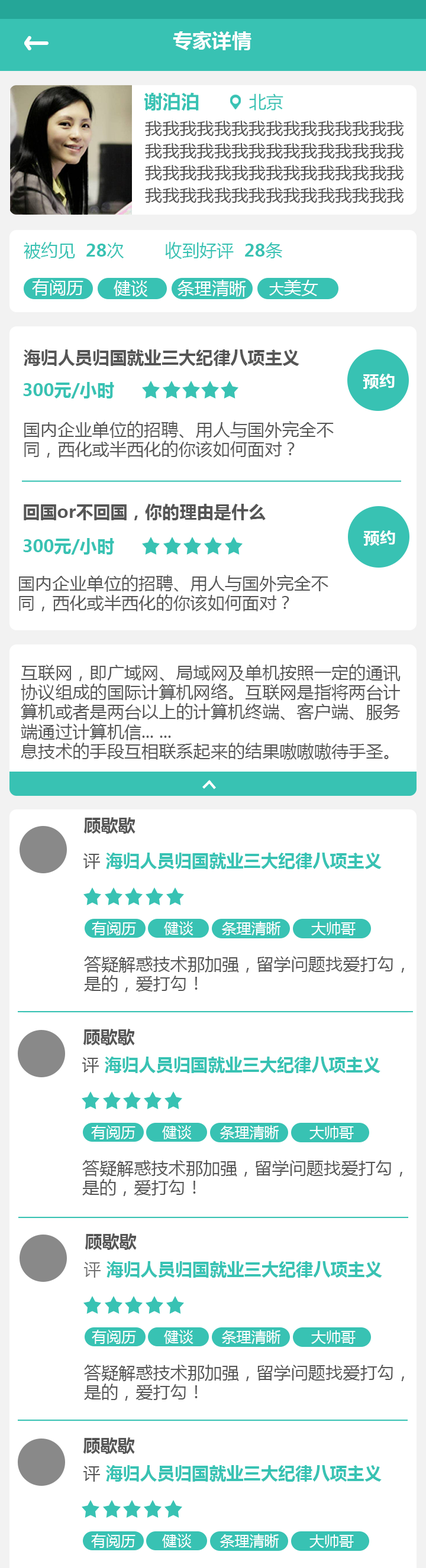
<style>
.page{position:relative;width:426px;height:1568px;background:#ffffff}
.page>*{position:absolute;margin:0}
.t1{font:19.7px "MicrosoftYaHei-Bold";color:#fefefe}
.t2{font:18.5px "MicrosoftYaHei-Bold";color:#38c2b3}
.t3{font:17.2px "MicrosoftYaHei";color:#38c2b3}
.t4{font:17.2px/22.2px "MicrosoftYaHei";color:#565656}
.t5{font:17.2px "MicrosoftYaHei-Bold";color:#38c2b3}
.t6{font:17.2px "MicrosoftYaHei";color:#ffffff}
.t7{font:14.8px "MicrosoftYaHei";color:#ffffff}
.t8{font:17.2px "MicrosoftYaHei-Bold";color:#565656}
.t9{font:16px "MicrosoftYaHei-Bold";color:#ffffff}
.t10{font:17.2px/19.7px "MicrosoftYaHei";color:#565656}
.t11{font:17.2px "MicrosoftYaHei";color:#565656}
.t12{font:14.8px "MicrosoftYaHei";color:#fefefe}
.t13{font:17.2px "MicrosoftYaHei";color:#727272}
</style>
<div class="page">
<p class="t1" style="left:173px;top:31px;width:78px;height:19px">专家详情</p>
<p class="t2" style="left:144px;top:92px;width:55px;height:19px">谢泊泊</p>
<p class="t3" style="left:249px;top:93px;width:34px;height:18px">北京</p>
<p class="t4" style="left:145px;top:121px;width:258px;height:82px">我我我我我我我我我我我我我我我我我我我我我我我我我我我我我我我我我我我我我我我我我我我我我我我我我我我我我我我我我我我我</p>
<p class="t3" style="left:24px;top:242px;width:259px;height:17px">被约见  <span class="t5">28</span>次        收到好评  <span class="t5">28</span>条</p>
<p class="t6" style="left:32px;top:279px;width:51px;height:17px">有阅历</p>
<p class="t6" style="left:114px;top:280px;width:34px;height:17px">健谈</p>
<p class="t6" style="left:177px;top:280px;width:69px;height:17px">条理清晰</p>
<p class="t6" style="left:269px;top:280px;width:49px;height:16px"><span class="t7">大</span>美女</p>
<p class="t8" style="left:23px;top:349px;width:276px;height:17px">海归人员归国就业三大纪律八项主义</p>
<p class="t9" style="left:362px;top:374px;width:32px;height:15px">预约</p>
<p class="t5" style="left:23px;top:382px;width:91px;height:17px">300元/小时</p>
<p class="t10" style="left:24px;top:421px;width:309px;height:37px">国内企业单位的招聘、用人与国外完全不同，西化或半西化的你该如何面对？</p>
<p class="t8" style="left:24px;top:504px;width:241px;height:16px">回国or不回国，你的理由是什么</p>
<p class="t9" style="left:363px;top:530px;width:32px;height:16px">预约</p>
<p class="t5" style="left:23px;top:538px;width:91px;height:17px">300元/小时</p>
<p class="t10" style="left:19px;top:575px;width:309px;height:36px">国内企业单位的招聘、用人与国外完全不同，西化或半西化的你该如何面对？</p>
<p class="t10" style="left:21px;top:664px;width:379px;height:96px">互联网，即广域网、局域网及单机按照一定的通讯协议组成的国际计算机网络。互联网是指将两台计算机或者是两台以上的计算机终端、客户端、服务端通过计算机信... ...<br>息技术的手段互相联系起来的结果嗷嗷嗷待手圣。</p>
<p class="t8" style="left:83px;top:817px;width:52px;height:17px">顾歇歇</p>
<p class="t5" style="left:83px;top:853px;width:298px;height:16px"><span class="t11">评</span> 海归人员归国就业三大纪律八项主义</p>
<p class="t7" style="left:92px;top:921px;width:44px;height:14px">有阅历</p>
<p class="t7" style="left:164px;top:921px;width:29px;height:14px">健谈</p>
<p class="t12" style="left:221px;top:921px;width:59px;height:14px">条理清晰</p>
<p class="t7" style="left:311px;top:922px;width:44px;height:13px">大帅哥</p>
<p class="t10" style="left:84px;top:956px;width:320px;height:36px">答疑解惑技术那加强，留学问题找爱打勾，是的，爱打勾！</p>
<p class="t8" style="left:83px;top:1029px;width:52px;height:16px">顾歇歇</p>
<p class="t5" style="left:82px;top:1057px;width:298px;height:16px"><span class="t11">评</span> 海归人员归国就业三大纪律八项主义</p>
<p class="t7" style="left:91px;top:1125px;width:44px;height:14px">有阅历</p>
<p class="t7" style="left:162px;top:1125px;width:30px;height:14px">健谈</p>
<p class="t12" style="left:219px;top:1125px;width:59px;height:14px">条理清晰</p>
<p class="t7" style="left:309px;top:1126px;width:45px;height:13px">大帅哥</p>
<p class="t10" style="left:82px;top:1160px;width:320px;height:36px">答疑解惑技术那加强，留学问题找爱打勾，是的，爱打勾！</p>
<p class="t8" style="left:85px;top:1233px;width:52px;height:17px">顾歇歇</p>
<p class="t5" style="left:84px;top:1261px;width:298px;height:17px"><span class="t13">评</span> 海归人员归国就业三大纪律八项主义</p>
<p class="t7" style="left:92px;top:1330px;width:44px;height:14px">有阅历</p>
<p class="t7" style="left:164px;top:1330px;width:29px;height:14px">健谈</p>
<p class="t12" style="left:221px;top:1330px;width:59px;height:14px">条理清晰</p>
<p class="t7" style="left:311px;top:1330px;width:44px;height:14px">大帅哥</p>
<p class="t10" style="left:84px;top:1365px;width:320px;height:36px">答疑解惑技术那加强，留学问题找爱打勾，是的，爱打勾！</p>
<p class="t8" style="left:83px;top:1437px;width:52px;height:17px">顾歇歇</p>
<p class="t5" style="left:83px;top:1465px;width:298px;height:17px"><span class="t11">评</span> 海归人员归国就业三大纪律八项主义</p>
<p class="t7" style="left:91px;top:1534px;width:44px;height:14px">有阅历</p>
<p class="t7" style="left:162px;top:1534px;width:30px;height:14px">健谈</p>
<p class="t12" style="left:219px;top:1534px;width:59px;height:14px">条理清晰</p>
<p class="t7" style="left:309px;top:1534px;width:45px;height:14px">大帅哥</p>
</div>
